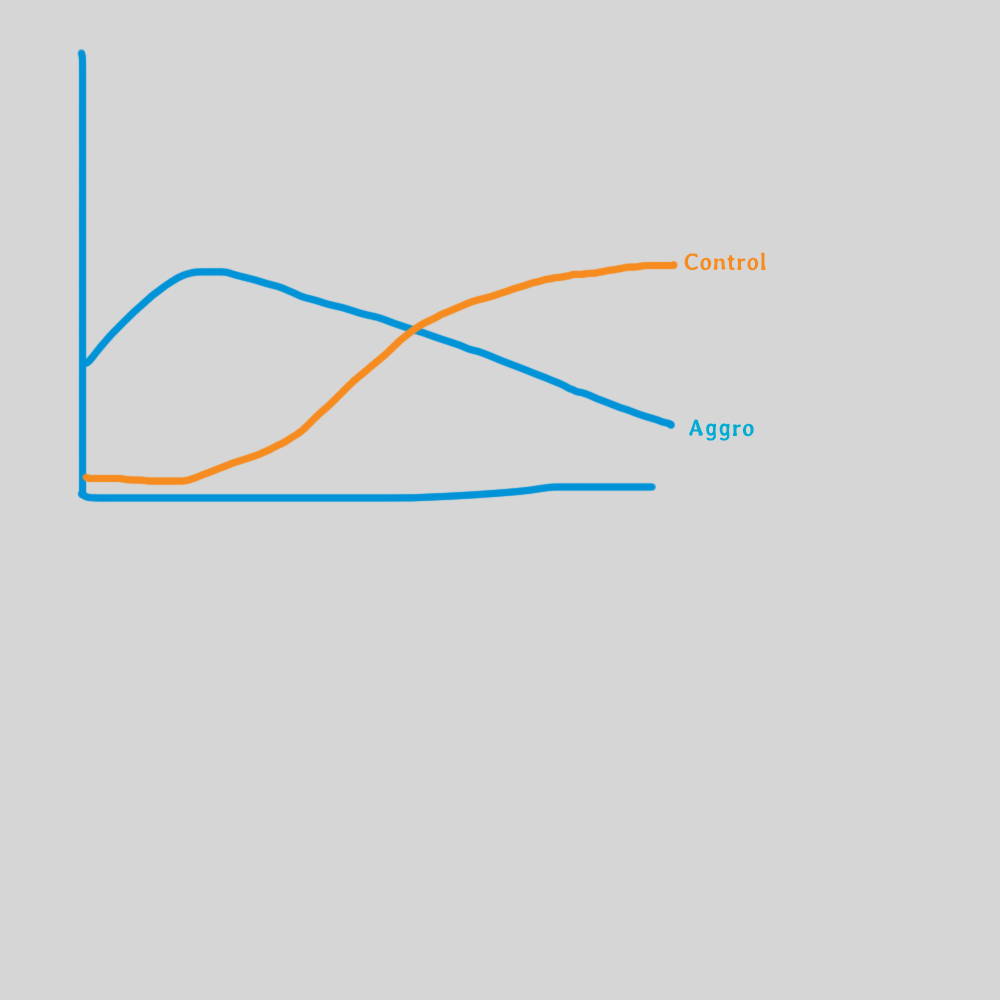
<style>
.page{position:relative;width:1000px;height:1000px;background:#d6d6d6}
.page>*{position:absolute;margin:0}
.t1{font:24px "Averia-Bold";color:#f68b1f}
.t2{font:24px "Averia-Bold";color:#00acd3}
</style>
<div class="page">
<p class="t1" style="left:684px;top:252px;width:82px;height:19px">Control</p>
<p class="t2" style="left:689px;top:419px;width:65px;height:22px">Aggro</p>
</div>
